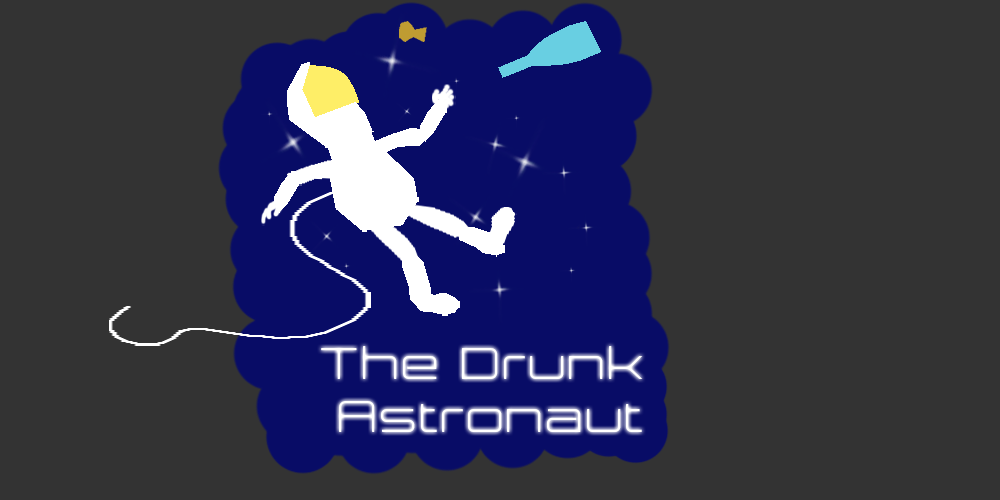
<style>
.page{position:relative;width:1000px;height:500px;background:#333333}
.page>*{position:absolute;margin:0}
.t1{font:43.5px "Expansiva";color:#ffffff}
</style>
<div class="page">
<p class="t1" style="left:321px;top:346px;width:322px;height:86px;text-align:right">The Drunk<br>Astronaut</p>
</div>
